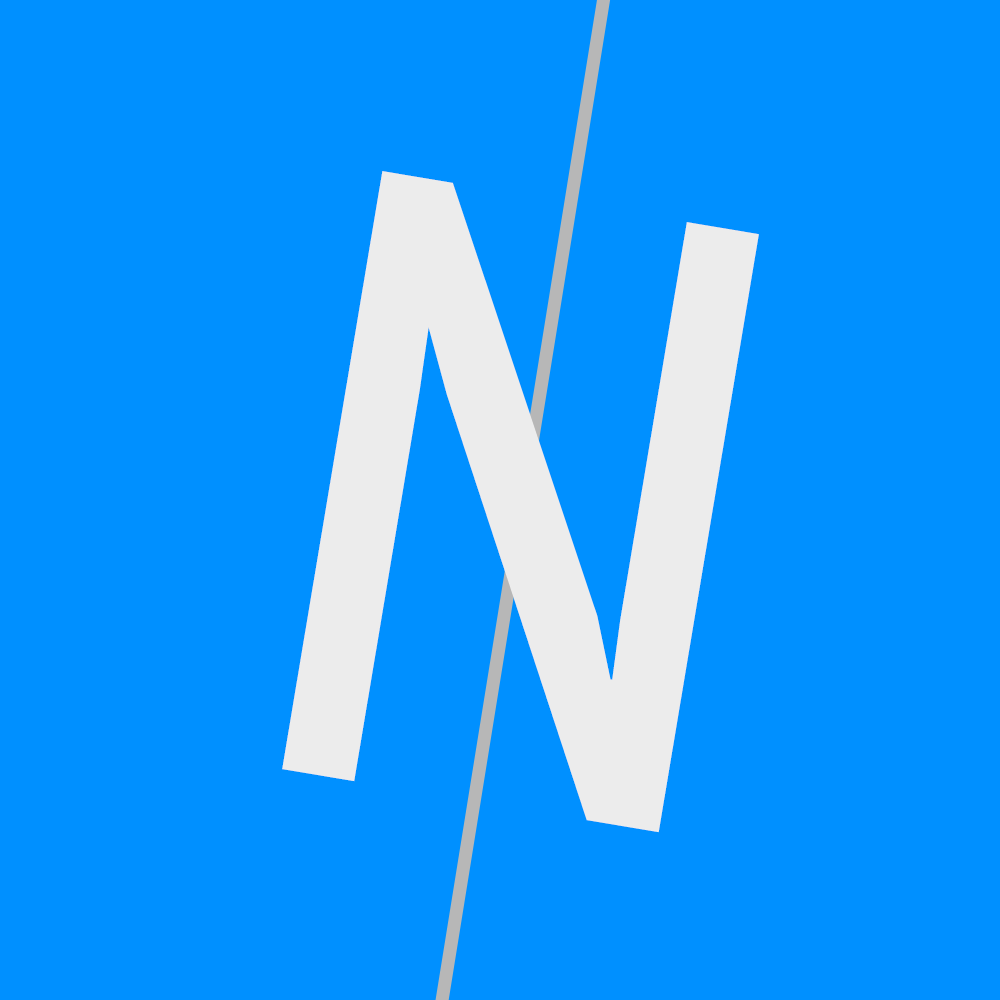
<style>
.page{position:relative;width:1000px;height:1000px;background:#0090ff}
.page>*{position:absolute;margin:0}
.t1{font:800px "Monaco";color:#ececec}
</style>
<div class="page">
<p class="t1" style="left:282px;top:171px;width:477px;height:662px;rotate:10deg">N</p>
</div>
